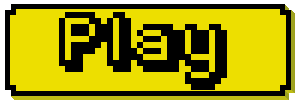
<style>
.page{position:relative;width:300px;height:100px;background:#eddf00}
.page>*{position:absolute;margin:0}
.t1{font:48px "Fipps-Regular";color:#000000}
</style>
<div class="page">
<p class="t1" style="left:59px;top:12px;width:168px;height:78px">Play</p>
</div>
